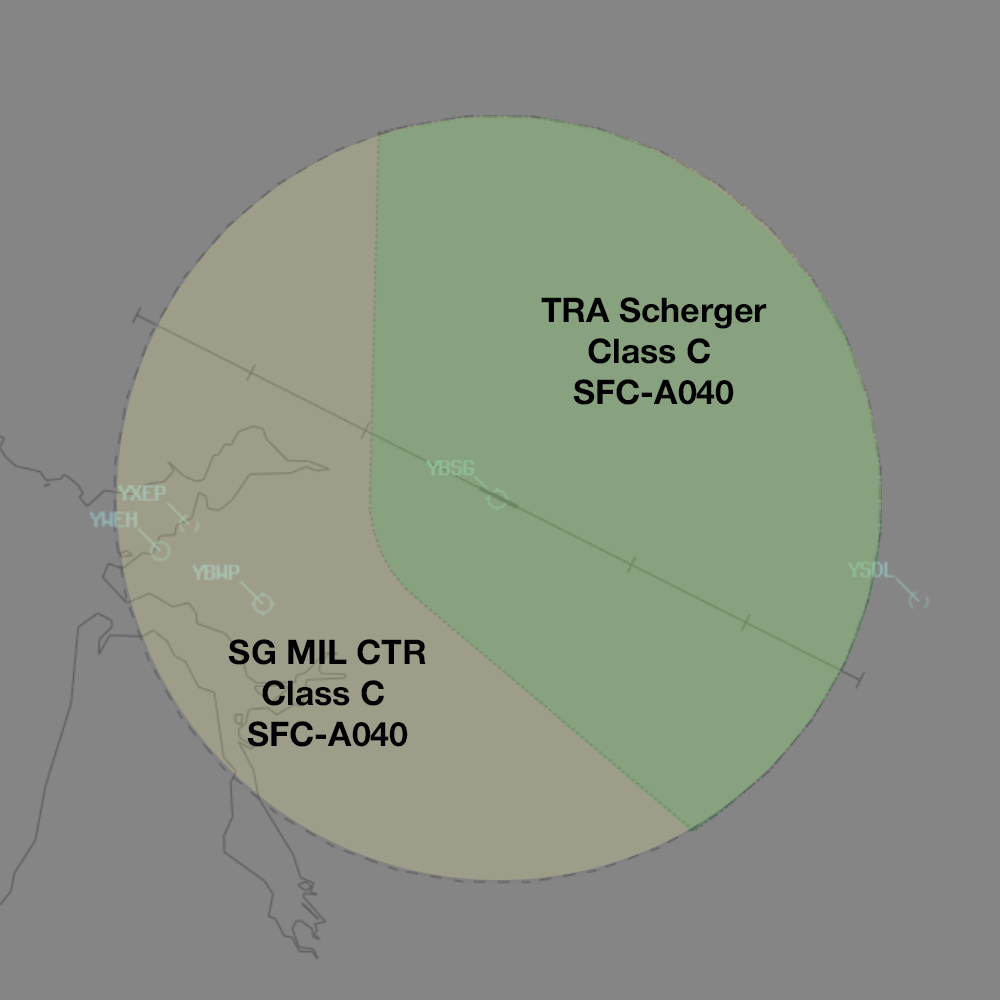
<style>
.page{position:relative;width:1000px;height:1000px;background:#858585}
.page>*{position:absolute;margin:0}
.t1{font:34px "HelveticaNeue-Bold";color:#000000}
</style>
<div class="page">
<p class="t1" style="left:541px;top:297px;width:226px;height:108px;text-align:center">TRA Scherger<br>Class C <br>SFC-A040</p>
<p class="t1" style="left:228px;top:639px;width:198px;height:108px;text-align:center">SG MIL CTR<br>Class C <br>SFC-A040</p>
</div>
